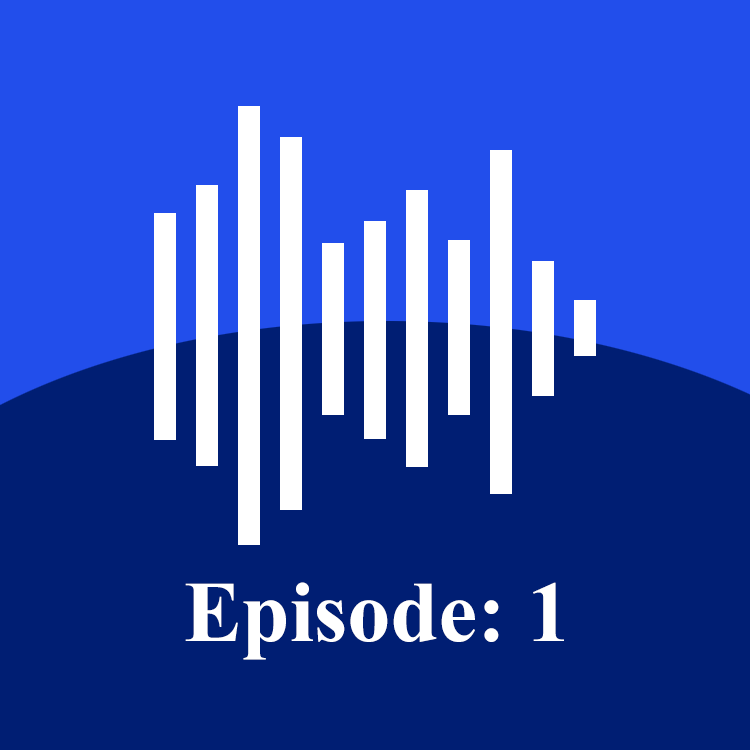
<style>
.page{position:relative;width:750px;height:750px;background:#001e73}
.page>*{position:absolute;margin:0}
.t1{font:86.4px "TimesNewRomanPS-BoldMT";color:#ffffff}
</style>
<div class="page">
<p class="t1" style="left:185px;top:582px;width:379px;height:78px">Episode: 1</p>
</div>
